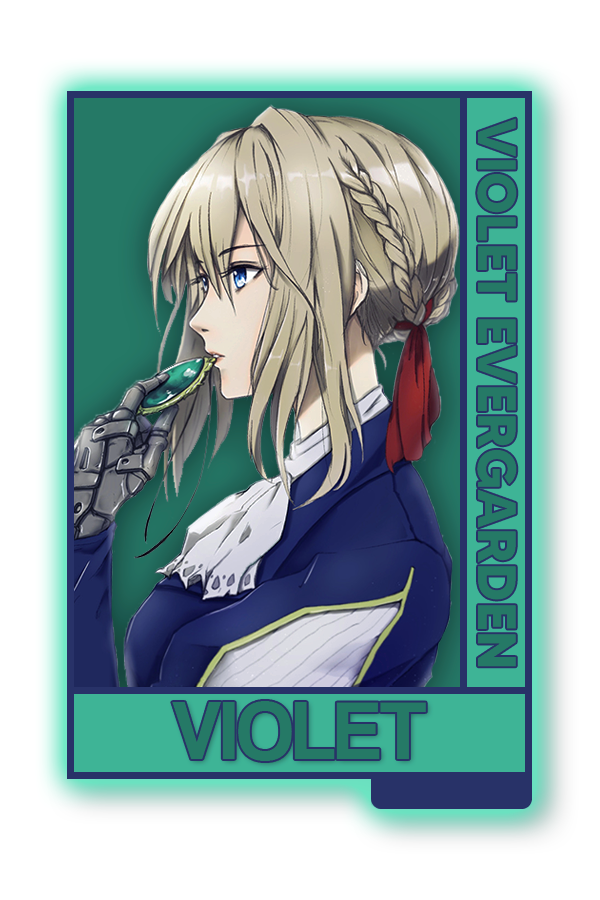
<style>
.page{position:relative;width:600px;height:900px;background:#ffffff}
.page>*{position:absolute;margin:0}
.t1{font:53.8px "MADETOMMY-Bold";color:#257966}
.t2{font:83.9px "CoolveticaRg-Regular";color:#257966}
</style>
<div class="page">
<p class="t1" style="left:477px;top:118px;width:40px;height:549px;rotate:90deg">VIOLET EVERGARDEN</p>
<p class="t2" style="left:172px;top:701px;width:254px;height:60px">VIOLET</p>
</div>
